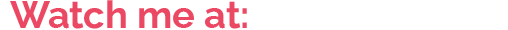
<style>
.page{position:relative;width:508px;height:30px;background:#ffffff}
.page>*{position:absolute;margin:0}
.t1{font:38px "Raleway-Bold";color:#eb4863}
</style>
<div class="page">
<p class="t1" style="left:10px;top:0px;width:237px;height:29px">Watch me at:</p>
</div>
